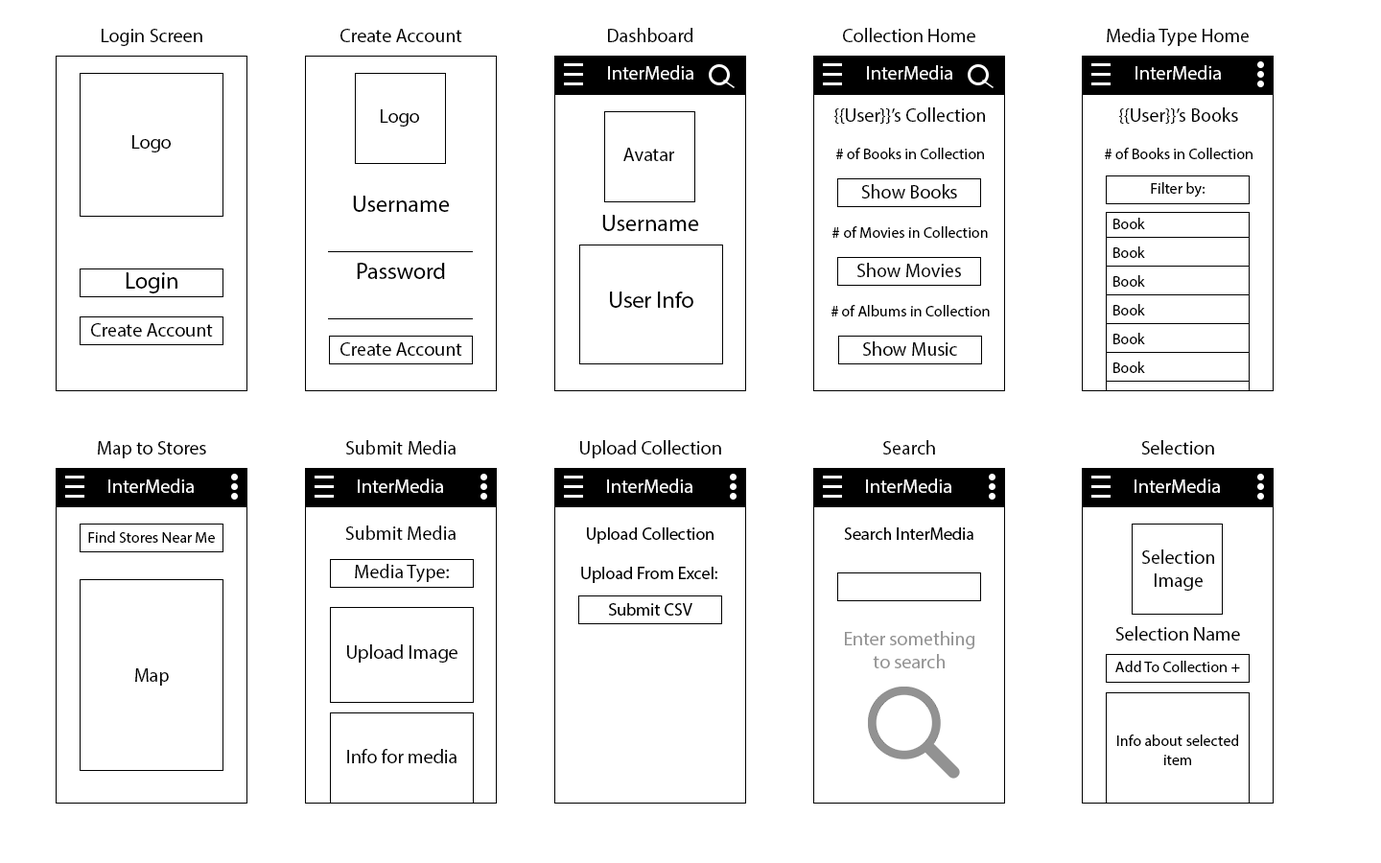
<style>
.page{position:relative;width:1381px;height:863px;background:#ffffff}
.page>*{position:absolute;margin:0}
.t1{font:19.2px "MyriadPro-Regular";color:#000000}
.t2{font:19.2px "MyriadPro-Regular";color:#ffffff}
.t3{font:15.3px "MyriadPro-Regular";color:#000000}
.t4{font:23px "MyriadPro-Regular";color:#000000}
.t5{font:17.3px "MyriadPro-Regular";color:#000000}
.t6{font:19.2px "MyriadPro-Regular";color:#929292}
</style>
<div class="page">
<p class="t1" style="left:102px;top:29px;width:100px;height:17px">Login Screen</p>
<p class="t1" style="left:341px;top:29px;width:121px;height:13px">Create Account</p>
<p class="t1" style="left:608px;top:28px;width:85px;height:14px">Dashboard</p>
<p class="t1" style="left:843px;top:28px;width:133px;height:14px">Collection Home</p>
<p class="t1" style="left:1107px;top:28px;width:142px;height:18px">Media Type Home</p>
<p class="t2" style="left:608px;top:65px;width:86px;height:15px">InterMedia</p>
<p class="t2" style="left:867px;top:65px;width:85px;height:15px">InterMedia</p>
<p class="t2" style="left:1136px;top:65px;width:85px;height:15px">InterMedia</p>
<p class="t1" style="left:381px;top:109px;width:38px;height:18px">Logo</p>
<p class="t1" style="left:835px;top:107px;width:150px;height:17px">{{User}}’s Collection</p>
<p class="t1" style="left:1119px;top:107px;width:119px;height:17px">{{User}}’s Books</p>
<p class="t1" style="left:132px;top:135px;width:39px;height:18px">Logo</p>
<p class="t1" style="left:623px;top:148px;width:51px;height:13px">Avatar</p>
<p class="t3" style="left:836px;top:148px;width:148px;height:11px"># of Books in Collection</p>
<p class="t3" style="left:1105px;top:148px;width:148px;height:11px"># of Books in Collection</p>
<p class="t1" style="left:861px;top:184px;width:96px;height:15px">Show Books</p>
<p class="t3" style="left:1151px;top:182px;width:55px;height:16px">Filter by:</p>
<p class="t4" style="left:353px;top:196px;width:97px;height:16px">Username</p>
<p class="t4" style="left:602px;top:215px;width:97px;height:16px">Username</p>
<p class="t3" style="left:1114px;top:218px;width:31px;height:11px">Book</p>
<p class="t3" style="left:833px;top:226px;width:155px;height:12px"># of Movies in Collection</p>
<p class="t3" style="left:1114px;top:247px;width:31px;height:11px">Book</p>
<p class="t4" style="left:357px;top:263px;width:88px;height:16px">Password</p>
<p class="t1" style="left:858px;top:263px;width:103px;height:14px">Show Movies</p>
<p class="t4" style="left:126px;top:272px;width:51px;height:22px">Login</p>
<p class="t3" style="left:1114px;top:275px;width:31px;height:12px">Book</p>
<p class="t4" style="left:610px;top:292px;width:84px;height:16px">User Info</p>
<p class="t3" style="left:832px;top:305px;width:158px;height:12px"># of Albums in Collection</p>
<p class="t3" style="left:1114px;top:304px;width:31px;height:12px">Book</p>
<p class="t1" style="left:91px;top:323px;width:122px;height:14px">Create Account</p>
<p class="t1" style="left:863px;top:341px;width:94px;height:15px">Show Music</p>
<p class="t3" style="left:1114px;top:333px;width:31px;height:11px">Book</p>
<p class="t1" style="left:341px;top:342px;width:121px;height:14px">Create Account</p>
<p class="t3" style="left:1114px;top:362px;width:31px;height:11px">Book</p>
<p class="t1" style="left:98px;top:441px;width:108px;height:18px">Map to Stores</p>
<p class="t1" style="left:346px;top:440px;width:110px;height:15px">Submit Media</p>
<p class="t1" style="left:580px;top:440px;width:141px;height:19px">Upload Collection</p>
<p class="t1" style="left:883px;top:440px;width:52px;height:15px">Search</p>
<p class="t1" style="left:1141px;top:440px;width:73px;height:15px">Selection</p>
<p class="t2" style="left:108px;top:479px;width:86px;height:14px">InterMedia</p>
<p class="t2" style="left:358px;top:479px;width:85px;height:14px">InterMedia</p>
<p class="t2" style="left:607px;top:479px;width:86px;height:14px">InterMedia</p>
<p class="t2" style="left:866px;top:479px;width:86px;height:14px">InterMedia</p>
<p class="t2" style="left:1135px;top:479px;width:85px;height:14px">InterMedia</p>
<p class="t3" style="left:88px;top:531px;width:127px;height:12px">Find Stores Near Me</p>
<p class="t1" style="left:345px;top:526px;width:111px;height:14px">Submit Media</p>
<p class="t5" style="left:587px;top:528px;width:127px;height:16px">Upload Collection</p>
<p class="t5" style="left:844px;top:528px;width:130px;height:12px">Search InterMedia</p>
<p class="t1" style="left:1142px;top:550px;width:72px;height:41px;text-align:center">Selection<br>Image</p>
<p class="t1" style="left:355px;top:564px;width:94px;height:18px">Media Type:</p>
<p class="t5" style="left:581px;top:567px;width:136px;height:16px">Upload From Excel:</p>
<p class="t5" style="left:609px;top:603px;width:84px;height:13px">Submit CSV</p>
<p class="t1" style="left:1116px;top:626px;width:124px;height:15px">Selection Name</p>
<p class="t6" style="left:845px;top:631px;width:130px;height:38px;text-align:center">Enter something to search</p>
<p class="t1" style="left:347px;top:645px;width:111px;height:18px">Upload Image</p>
<p class="t3" style="left:1116px;top:661px;width:124px;height:11px">Add To Collection +</p>
<p class="t1" style="left:135px;top:669px;width:34px;height:17px">Map</p>
<p class="t3" style="left:1117px;top:735px;width:121px;height:30px;text-align:center">Info about selected item</p>
<p class="t1" style="left:347px;top:749px;width:110px;height:15px">Info for media</p>
</div>
